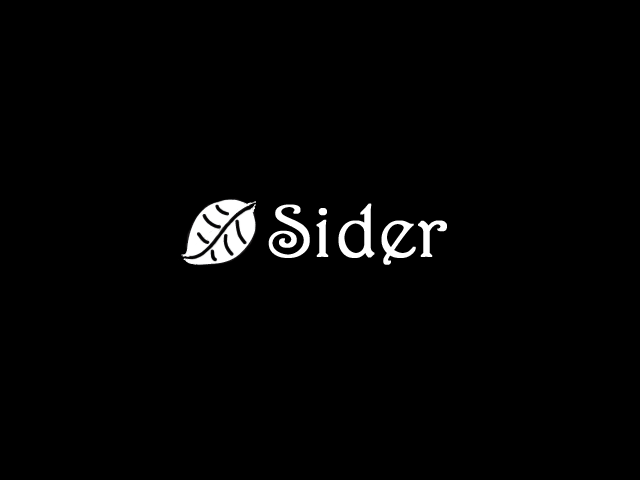
<style>
.page{position:relative;width:640px;height:480px;background:#000000}
.page>*{position:absolute;margin:0}
.t1{font:73.8px "Harrington";color:#ffffff;font-weight:bold}
</style>
<div class="page">
<p class="t1" style="left:268px;top:203px;width:179px;height:62px">Sider</p>
</div>
